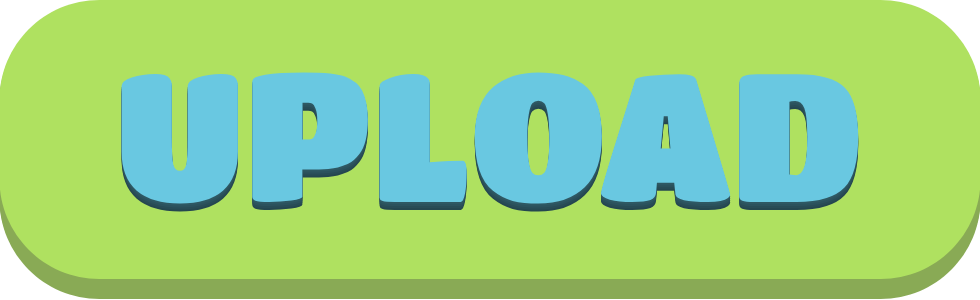
<style>
.page{position:relative;width:980px;height:300px;background:#afe160}
.page>*{position:absolute;margin:0}
.t1{font:180px "TitanOne";color:#69c8e1}
</style>
<div class="page">
<p class="t1" style="left:121px;top:72px;width:738px;height:132px">UPLOAD</p>
</div>
